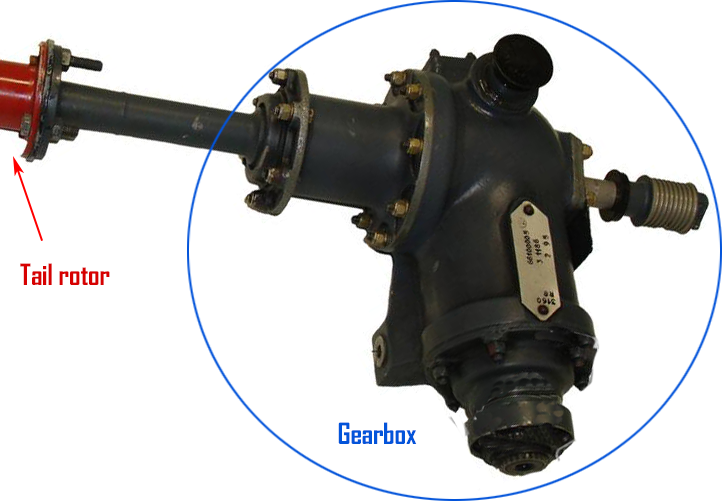
<style>
.page{position:relative;width:722px;height:501px;background:#ffffff}
.page>*{position:absolute;margin:0}
.t1{font:48px "AgencyFB-Bold";color:#d70101}
.t2{font:48px "AgencyFB-Bold";color:#0354da}
</style>
<div class="page">
<p class="t1" style="left:20px;top:263px;width:90px;height:22px">Tail rotor</p>
<p class="t2" style="left:338px;top:422px;width:79px;height:22px">Gearbox</p>
</div>
